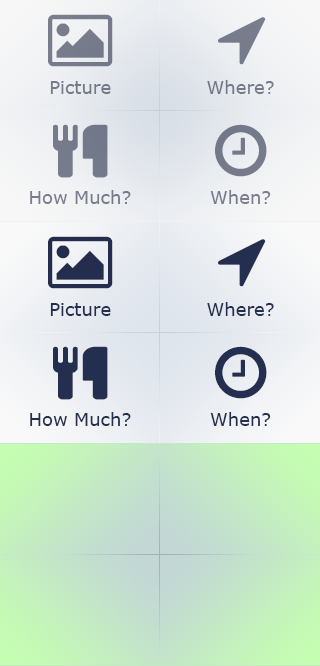
<style>
.page{position:relative;width:320px;height:666px}
.page>*{position:absolute;margin:0}
.t1{font:18px "Verdana";color:#242e4e}
</style>
<div class="page">
<p class="t1" style="left:50px;top:303px;width:61px;height:13px">Picture</p>
<p class="t1" style="left:207px;top:302px;width:67px;height:14px">Where?</p>
<p class="t1" style="left:30px;top:412px;width:101px;height:14px">How Much?</p>
<p class="t1" style="left:210px;top:412px;width:61px;height:14px">When?</p>
</div>
